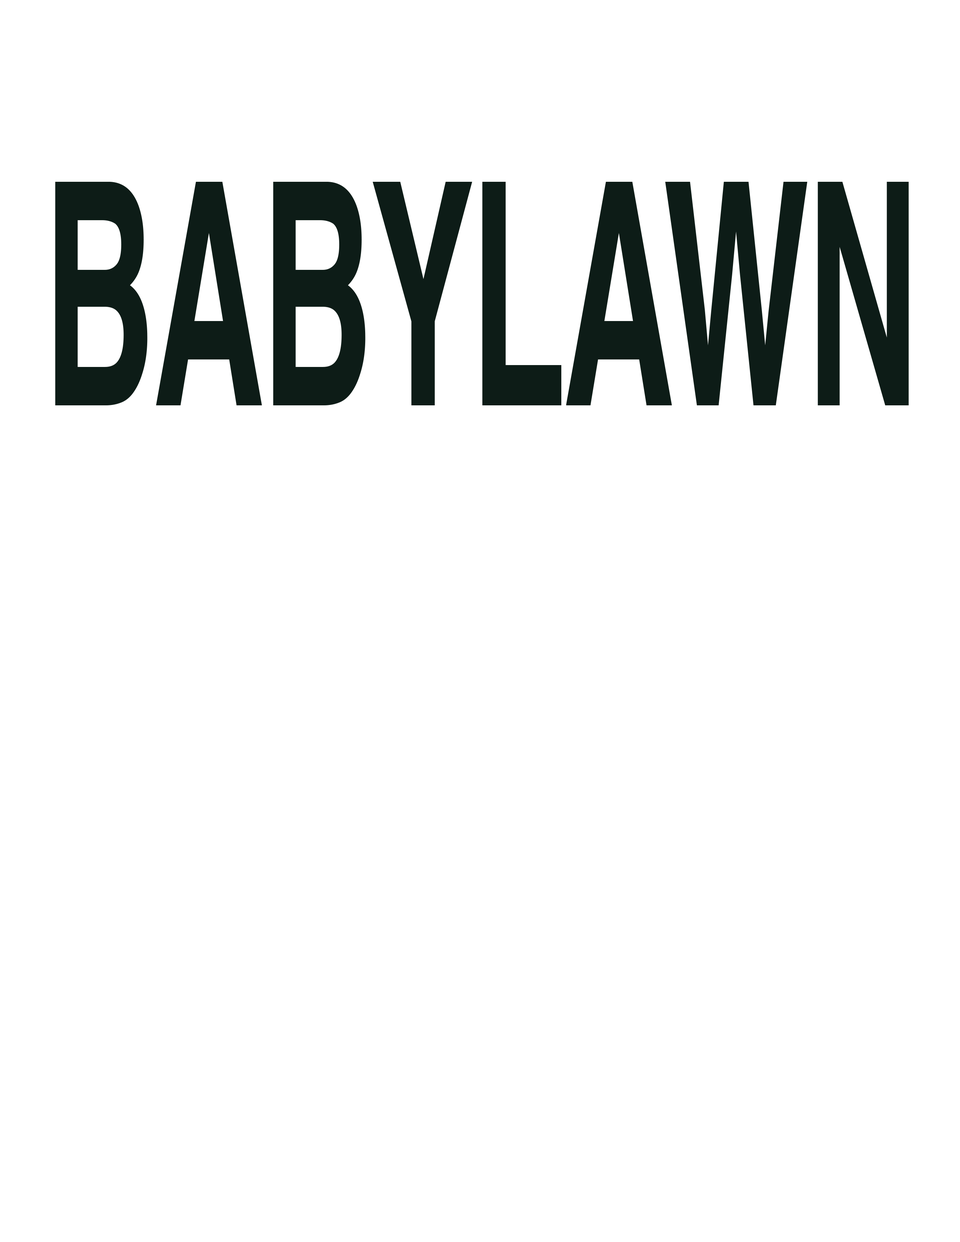
<style>
.page{position:relative;width:960px;height:1242px;background:#ffffff}
.page>*{position:absolute;margin:0}
.t1{font:310.6px "Helvetica-Bold";letter-spacing:-0.02em;color:#0d1c17;scale:0.5 1}
</style>
<div class="page">
<p class="t1" style="left:55px;top:182px;width:854px;height:223px">BABYLAWN</p>
</div>
